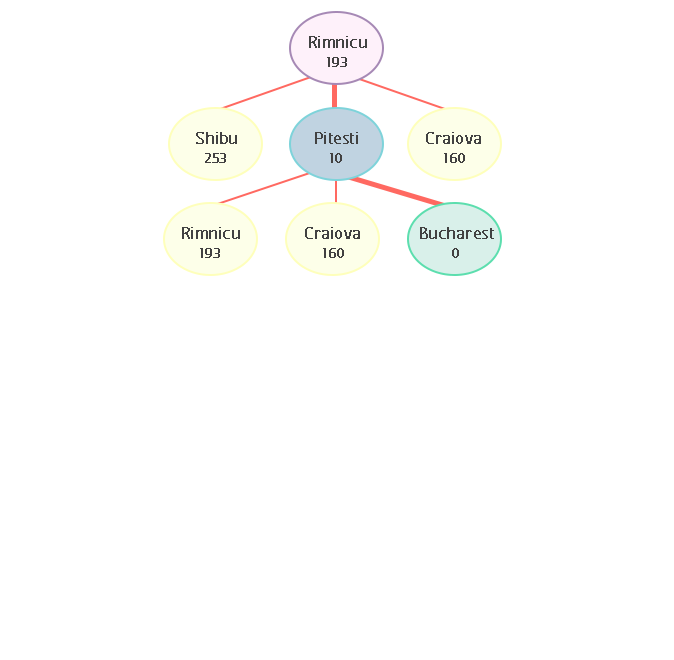
<style>
.page{position:relative;width:674px;height:660px;background:#ffffff}
.page>*{position:absolute;margin:0}
.t1{font:20.8px "FCActiveRegular";color:#424242;font-weight:bold}
.t2{font:16.7px "FCActiveRegular";color:#424141;font-weight:bold}
</style>
<div class="page">
<p class="t1" style="left:309px;top:36px;width:58px;height:12px">Rimnicu</p>
<p class="t2" style="left:327px;top:57px;width:20px;height:10px">193</p>
<p class="t1" style="left:196px;top:132px;width:41px;height:12px">Shibu</p>
<p class="t1" style="left:315px;top:132px;width:43px;height:12px">Pitesti</p>
<p class="t1" style="left:426px;top:132px;width:55px;height:12px">Craiova</p>
<p class="t2" style="left:205px;top:153px;width:21px;height:10px">253</p>
<p class="t2" style="left:330px;top:153px;width:12px;height:10px">10</p>
<p class="t2" style="left:444px;top:153px;width:21px;height:10px">160</p>
<p class="t1" style="left:182px;top:227px;width:58px;height:12px">Rimnicu</p>
<p class="t1" style="left:305px;top:227px;width:55px;height:12px">Craiova</p>
<p class="t1" style="left:420px;top:227px;width:74px;height:12px">Bucharest</p>
<p class="t2" style="left:200px;top:248px;width:20px;height:10px">193</p>
<p class="t2" style="left:323px;top:248px;width:21px;height:10px">160</p>
<p class="t2" style="left:452px;top:248px;width:7px;height:10px">0</p>
</div>
